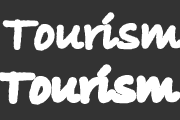
<style>
.page{position:relative;width:180px;height:120px;background:#333333}
.page>*{position:absolute;margin:0}
.t1{font:48px "BradleyHandITC";color:#ffffff;font-weight:bold}
</style>
<div class="page">
<p class="t1" style="left:4px;top:14px;width:178px;height:35px">Tourism</p>
<p class="t1" style="left:0px;top:67px;width:178px;height:35px">Tourism</p>
</div>
